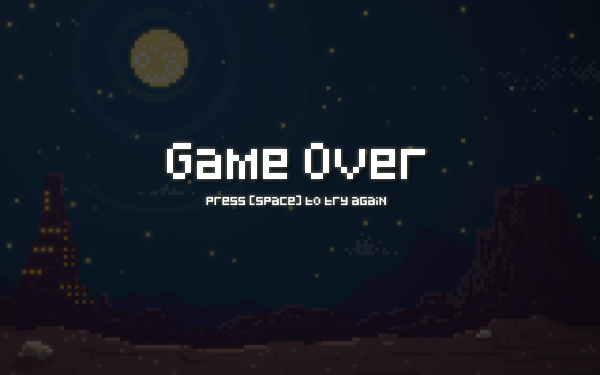
<style>
.page{position:relative;width:600px;height:375px}
.page>*{position:absolute;margin:0}
.t1{font:30px "Pixeled";color:#ffffff}
.t2{font:8px "Pixeled";color:#ffffff}
</style>
<div class="page">
<p class="t1" style="left:167px;top:143px;width:258px;height:36px">Game Over</p>
<p class="t2" style="left:206px;top:195px;width:181px;height:11px">press [space] to try again</p>
</div>
